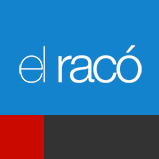
<style>
.page{position:relative;width:159px;height:159px;background:#1483ce}
.page>*{position:absolute;margin:0}
.t1{font:50.2px "HelveticaNeue-Light";letter-spacing:-0.06em;color:#ffffff}
.t2{font:50.2px "HelveticaNeue-UltraLight";letter-spacing:-0.06em;color:#ffffff}
</style>
<div class="page">
<p class="t1" style="left:19px;top:45px;width:123px;height:38px"><span class="t2">el</span> racó</p>
</div>
